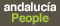
<style>
.page{position:relative;width:60px;height:26px;background:#5a5446}
.page>*{position:absolute;margin:0}
.t1{font:12px "Helvetica-Bold";letter-spacing:-0.025em;color:#ffffff}
.t2{font:12px "Helvetica-Bold";letter-spacing:-0.025em;color:#acc83e}
</style>
<div class="page">
<p class="t1" style="left:4px;top:2px;width:53px;height:10px">andalucía</p>
<p class="t2" style="left:12px;top:13px;width:37px;height:12px">People</p>
</div>
